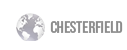
<style>
.page{position:relative;width:127px;height:50px;background:#ffffff}
.page>*{position:absolute;margin:0}
.t1{font:16.7px "BebasNeue";color:#8c8c8c}
</style>
<div class="page">
<p class="t1" style="left:50px;top:21px;width:73px;height:12px">chesterfield</p>
</div>
